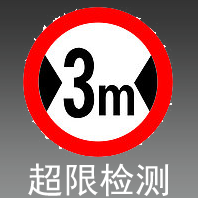
<style>
.page{position:relative;width:198px;height:198px}
.page>*{position:absolute;margin:0}
.t1{font:36px "SimHei";color:#ffffff}
</style>
<div class="page">
<p class="t1" style="left:28px;top:163px;width:141px;height:34px">超限检测</p>
</div>
